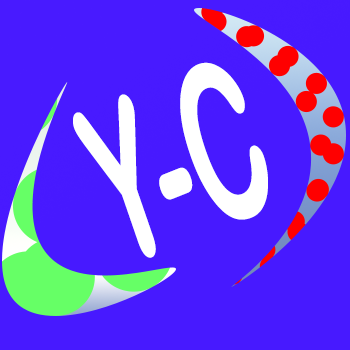
<style>
.page{position:relative;width:350px;height:350px;background:#4719ff}
.page>*{position:absolute;margin:0}
.t1{font:218.8px "ArialRoundedMTBold";color:#ffffff;font-style:italic;scale:0.49 1}
</style>
<div class="page">
<p class="t1" style="left:73px;top:62px;width:195px;height:196px;rotate:-22deg">Y-C</p>
</div>
